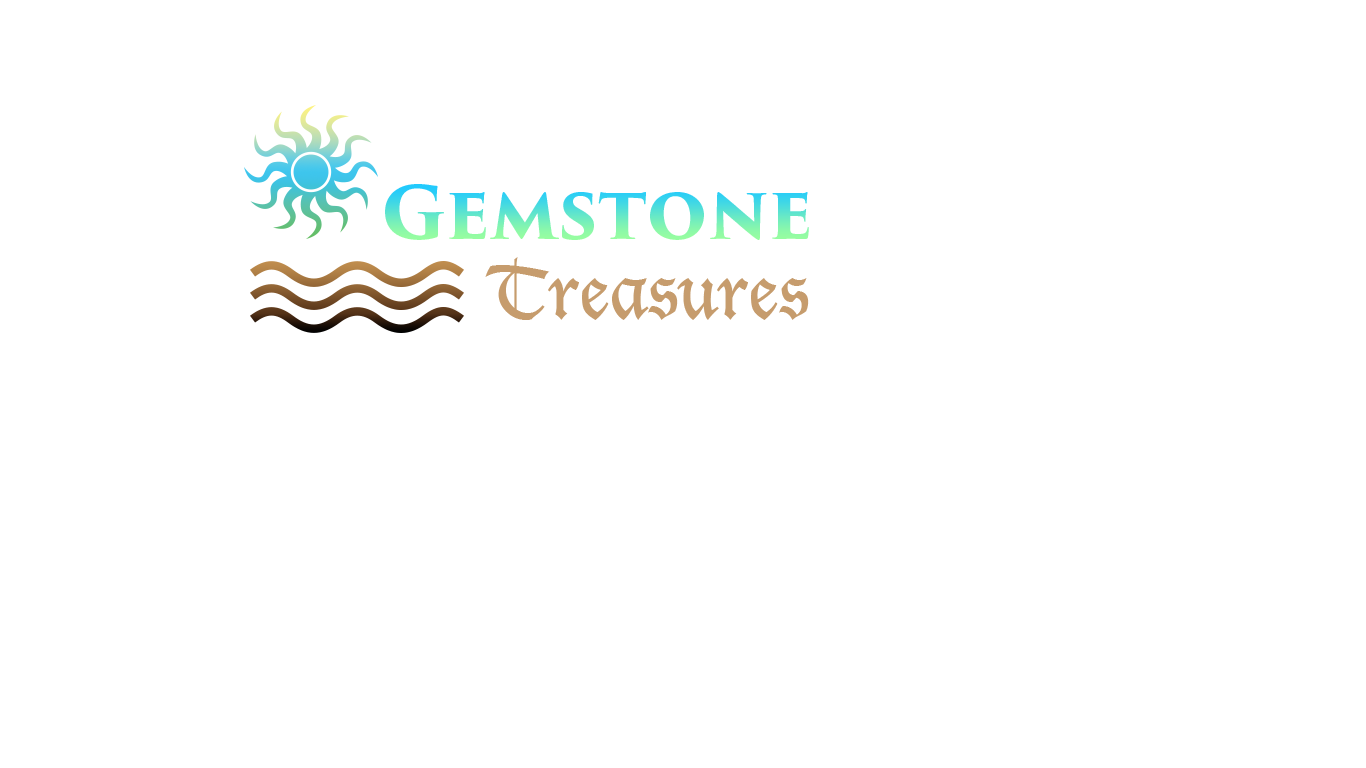
<style>
.page{position:relative;width:1366px;height:768px;background:#ffffff}
.page>*{position:absolute;margin:0}
.t1{font:72px "TrajanPro3-Bold"}
.t2{font:72px "LucidaBlackletter";color:#c69c6d}
</style>
<div class="page">
<p class="t1" style="left:385px;top:184px;width:424px;height:56px">Gemstone</p>
<p class="t2" style="left:485px;top:257px;width:324px;height:63px">Treasures</p>
</div>
